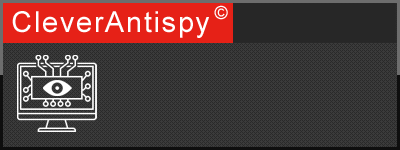
<style>
.page{position:relative;width:400px;height:150px;background:#3b3b3b}
.page>*{position:absolute;margin:0}
.t1{font:18px "ArialMT";letter-spacing:0.06em;color:#ffffff}
.t2{font:28.8px "ArialMT";letter-spacing:0.06em;color:#ffffff}
</style>
<div class="page">
<p class="t1" style="left:214px;top:5px;width:14px;height:15px">©</p>
<p class="t2" style="left:12px;top:11px;width:197px;height:27px">CleverAntispy</p>
</div>
